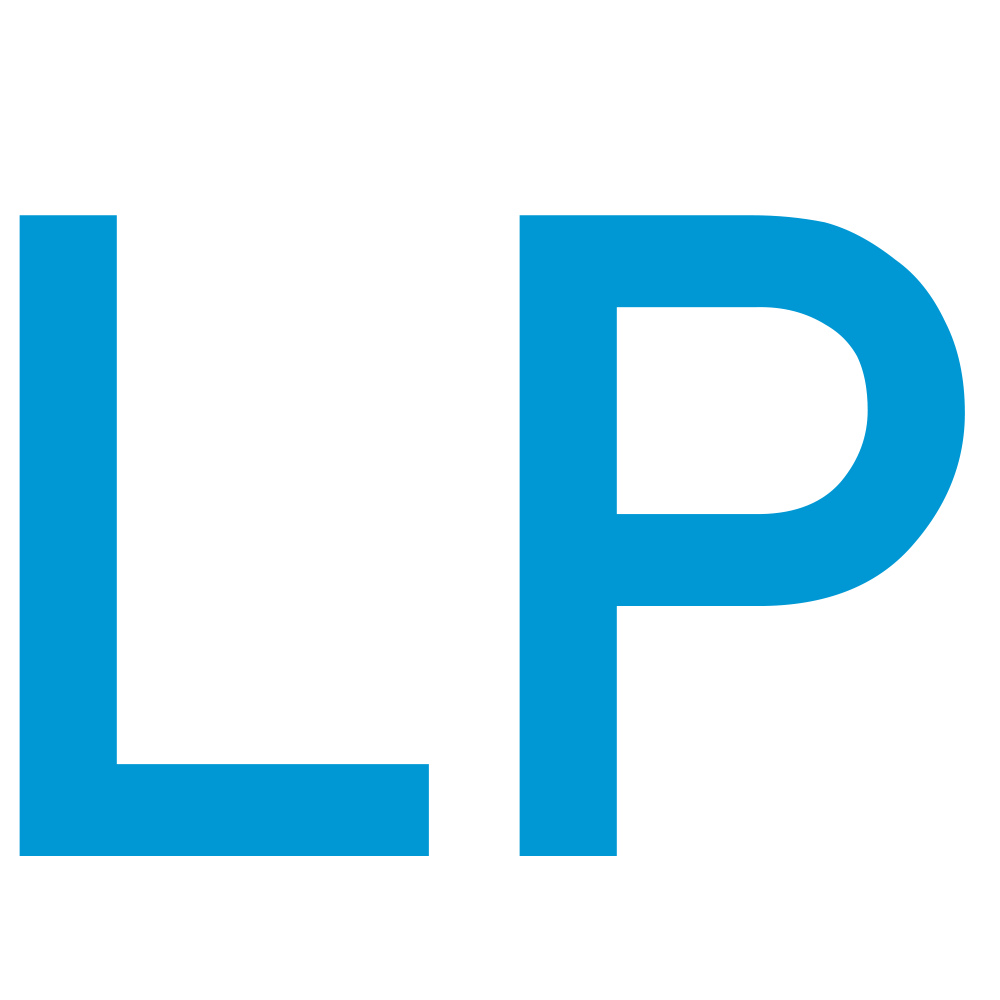
<style>
.page{position:relative;width:1000px;height:1000px;background:#ffffff}
.page>*{position:absolute;margin:0}
.t1{font:900px "DINAlternate-Bold";color:#0098d4}
</style>
<div class="page">
<p class="t1" style="left:19px;top:215px;width:946px;height:641px">LP</p>
</div>
